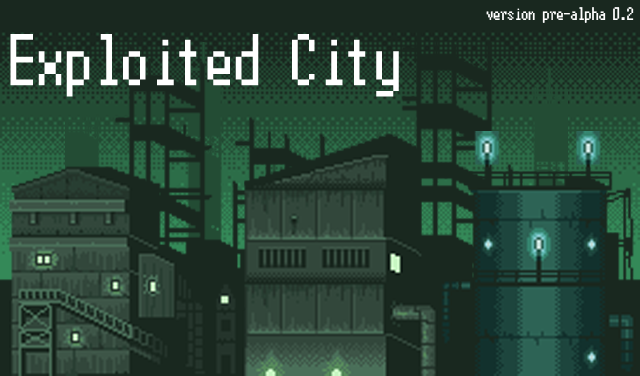
<style>
.page{position:relative;width:640px;height:376px;background:#19281f}
.page>*{position:absolute;margin:0}
.t1{font:18.2px "Terminal";color:#ffffff}
.t2{font:72.7px "Terminal";color:#ffffff}
</style>
<div class="page">
<p class="t1" style="left:486px;top:7px;width:148px;height:16px">version pre-alpha 0.2</p>
<p class="t2" style="left:10px;top:34px;width:389px;height:63px">Exploited City</p>
</div>
